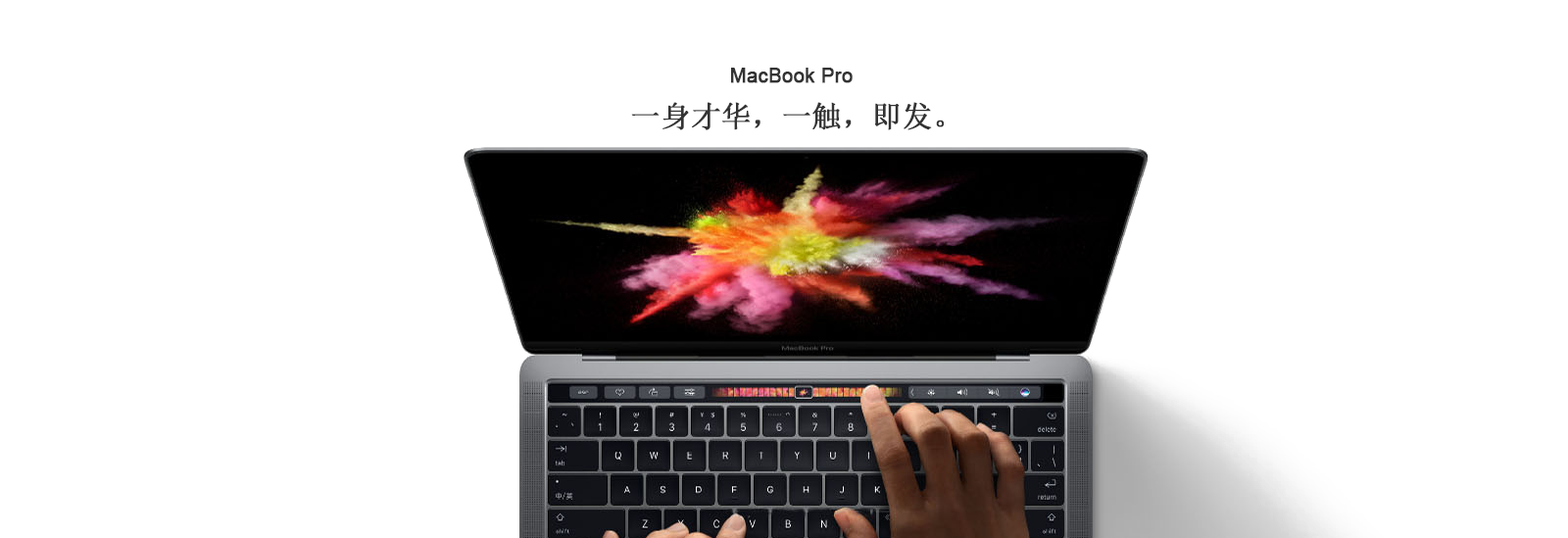
<style>
.page{position:relative;width:1568px;height:538px;background:#ffffff}
.page>*{position:absolute;margin:0}
.t1{font:19.6px "ArialMT";color:#333333;font-weight:bold}
.t2{font:29.4px "SimSun";color:#333333;font-weight:bold}
</style>
<div class="page">
<p class="t1" style="left:731px;top:68px;width:122px;height:15px">MacBook Pro</p>
<p class="t2" style="left:631px;top:102px;width:313px;height:28px">一身才华，一触，即发。</p>
</div>
